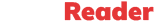
<style>
.page{position:relative;width:155px;height:23px;background:#ffffff}
.page>*{position:absolute;margin:0}
.t1{font:25px "MulishRoman-ExtraBlack";color:#e53637}
.t2{font:25px "MulishRoman-ExtraBlack";color:#ffffff}
</style>
<div class="page">
<p class="t1" style="left:2px;top:1px;width:152px;height:20px"><span class="t2">Toon</span>Reader</p>
</div>
